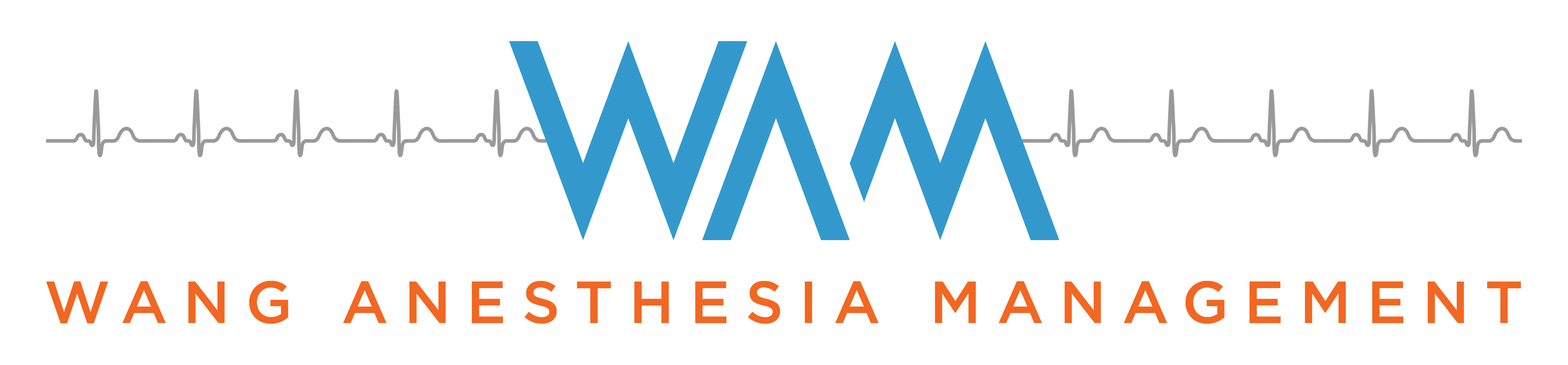
<style>
.page{position:relative;width:1568px;height:365px;background:#ffffff}
.page>*{position:absolute;margin:0}
.t1{font:59.3px "Gotham-Medium";letter-spacing:0.265em;color:#f26722}
</style>
<div class="page">
<p class="t1" style="left:46px;top:281px;width:1475px;height:43px">WANG ANESTHESIA MANAGEMENT</p>
</div>
